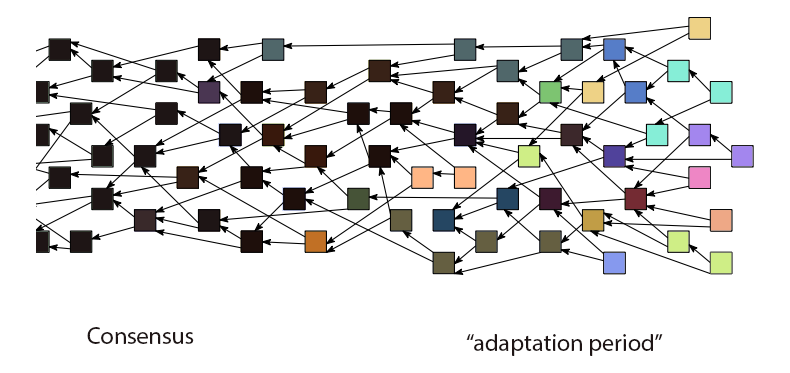
<style>
.page{position:relative;width:790px;height:373px;background:#ffffff}
.page>*{position:absolute;margin:0}
.t1{font:12px "MyriadPro-Regular";color:#1e1515}
</style>
<div class="page">
<p class="t1" style="left:87px;top:327px;width:107px;height:17px">Consensus</p>
<p class="t1" style="left:466px;top:334px;width:197px;height:22px">“adaptation period”</p>
</div>
